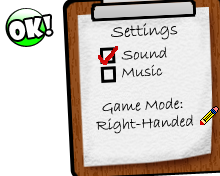
<style>
.page{position:relative;width:220px;height:176px;background:#ffffff}
.page>*{position:absolute;margin:0}
.t1{font:24px "ShowcardGothic-Reg";color:#fefefe}
.t2{font:18px "BradleyHandITC";color:#000000}
.t3{font:16px "BradleyHandITC";color:#000000}
</style>
<div class="page">
<p class="t1" style="left:9px;top:15px;width:43px;height:25px;rotate:-10deg">OK!</p>
<p class="t2" style="left:111px;top:23px;width:67px;height:17px;rotate:-3deg">Settings</p>
<p class="t3" style="left:121px;top:46px;width:46px;height:14px;rotate:-3deg">Sound</p>
<p class="t3" style="left:122px;top:64px;width:41px;height:14px;rotate:-3deg">Music</p>
<p class="t3" style="left:102px;top:97px;width:81px;height:18px;rotate:-3deg">Game Mode:</p>
<p class="t3" style="left:96px;top:114px;width:98px;height:20px;rotate:-3deg">Right-Handed</p>
</div>
